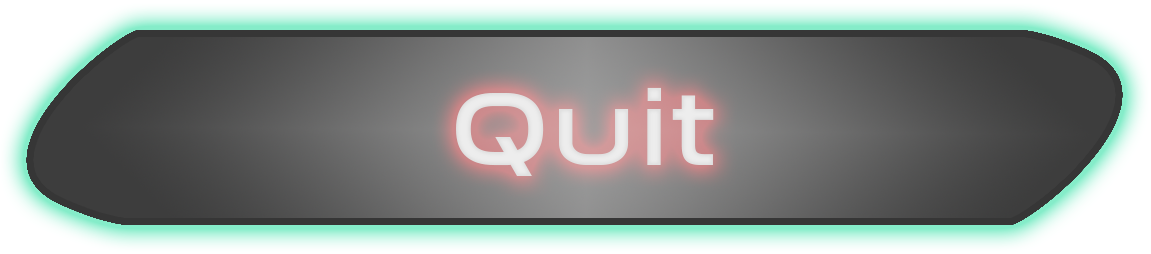
<style>
.page{position:relative;width:1151px;height:254px}
.page>*{position:absolute;margin:0}
.t1{font:106.4px "NasalizationRg-Regular";color:#ededed;scale:1.17 1}
</style>
<div class="page">
<p class="t1" style="left:456px;top:87px;width:258px;height:89px">Quit</p>
<p class="t1" style="left:456px;top:87px;width:258px;height:89px">Quit</p>
</div>
